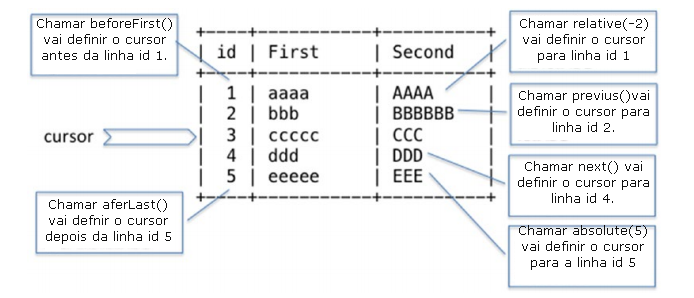
<style>
.page{position:relative;width:694px;height:298px;background:#ffffff}
.page>*{position:absolute;margin:0}
.t1{font:13.3px "Verdana";color:#0f0f0f}
</style>
<div class="page">
<p class="t1" style="left:37px;top:18px;width:135px;height:42px;text-align:center">Chamar beforeFirst()<br>vai definir o cursor <br>antes da linha id 1.</p>
<p class="t1" style="left:520px;top:18px;width:128px;height:45px;text-align:center">Chamar relative(-2) vai definir o cursor para linha id 1</p>
<p class="t1" style="left:518px;top:90px;width:131px;height:42px;text-align:center">Chamar previus()vai<br>definir o cursor para linha id 2.</p>
<p class="t1" style="left:518px;top:161px;width:131px;height:42px;text-align:center">Chamar next() vai<br>definir o cursor para linha id 4.</p>
<p class="t1" style="left:46px;top:199px;width:125px;height:45px;text-align:center">Chamar aferLast()<br>vai defnir o cursor <br>depois da linha id 5</p>
<p class="t1" style="left:519px;top:225px;width:128px;height:45px;text-align:center">Chamar absolute(5)<br>vai definir o cursor<br>para a linha id 5</p>
</div>
